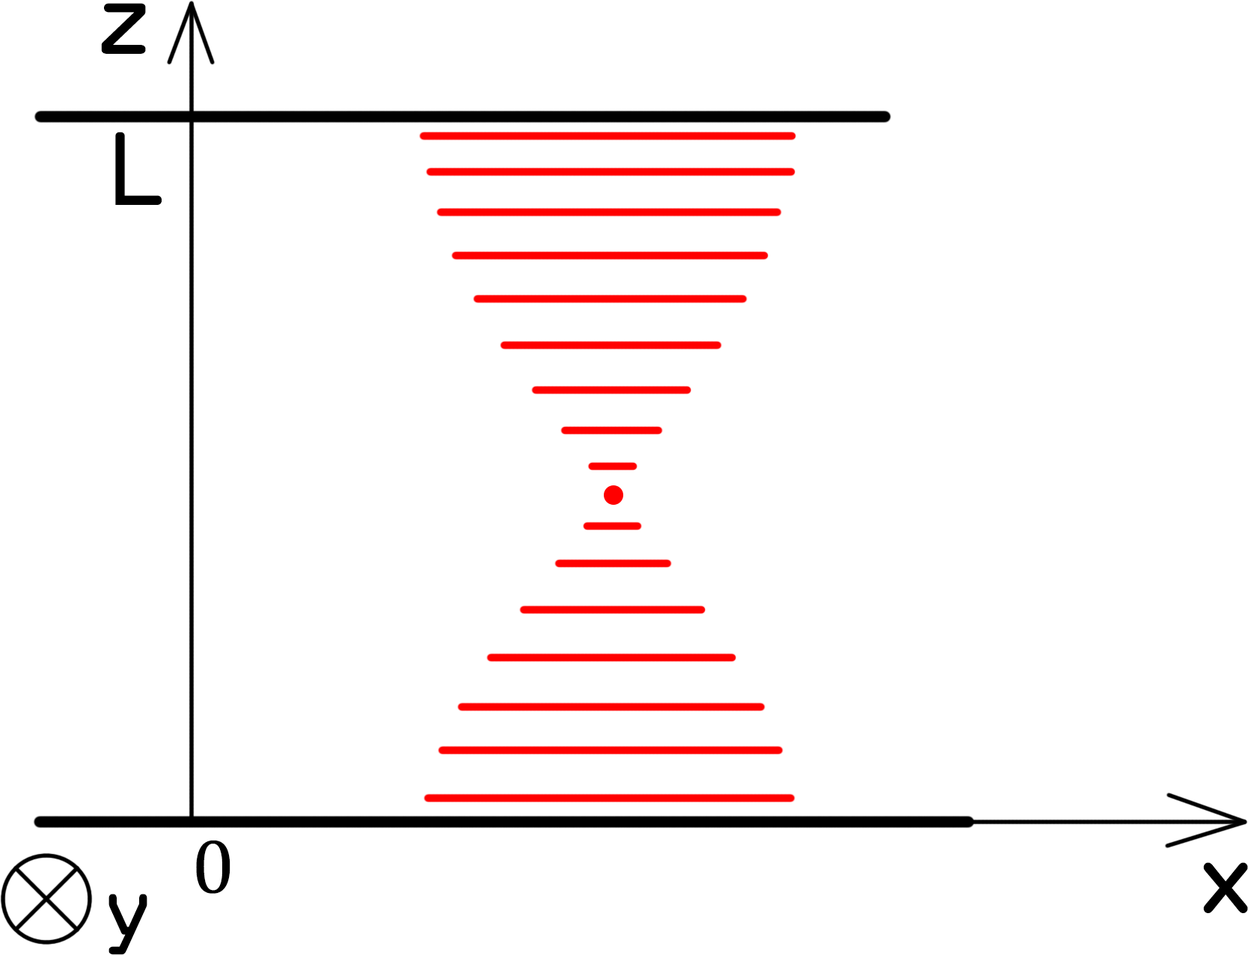
<style>
.page{position:relative;width:1248px;height:955px;background:#ffffff}
.page>*{position:absolute;margin:0}
.t1{font:93.5px "OCRAStd";color:#000000}
.t2{font:77.9px "CambriaMath";color:#000000}
.t3{font:81.1px "OCRAStd";color:#000000}
</style>
<div class="page">
<p class="t1" style="left:101px;top:3px;width:45px;height:51px">z</p>
<p class="t1" style="left:115px;top:132px;width:47px;height:73px">L</p>
<p class="t2" style="left:196px;top:840px;width:34px;height:54px">0</p>
<p class="t1" style="left:1203px;top:863px;width:45px;height:51px">x</p>
<p class="t3" style="left:108px;top:894px;width:39px;height:61px">y</p>
</div>
